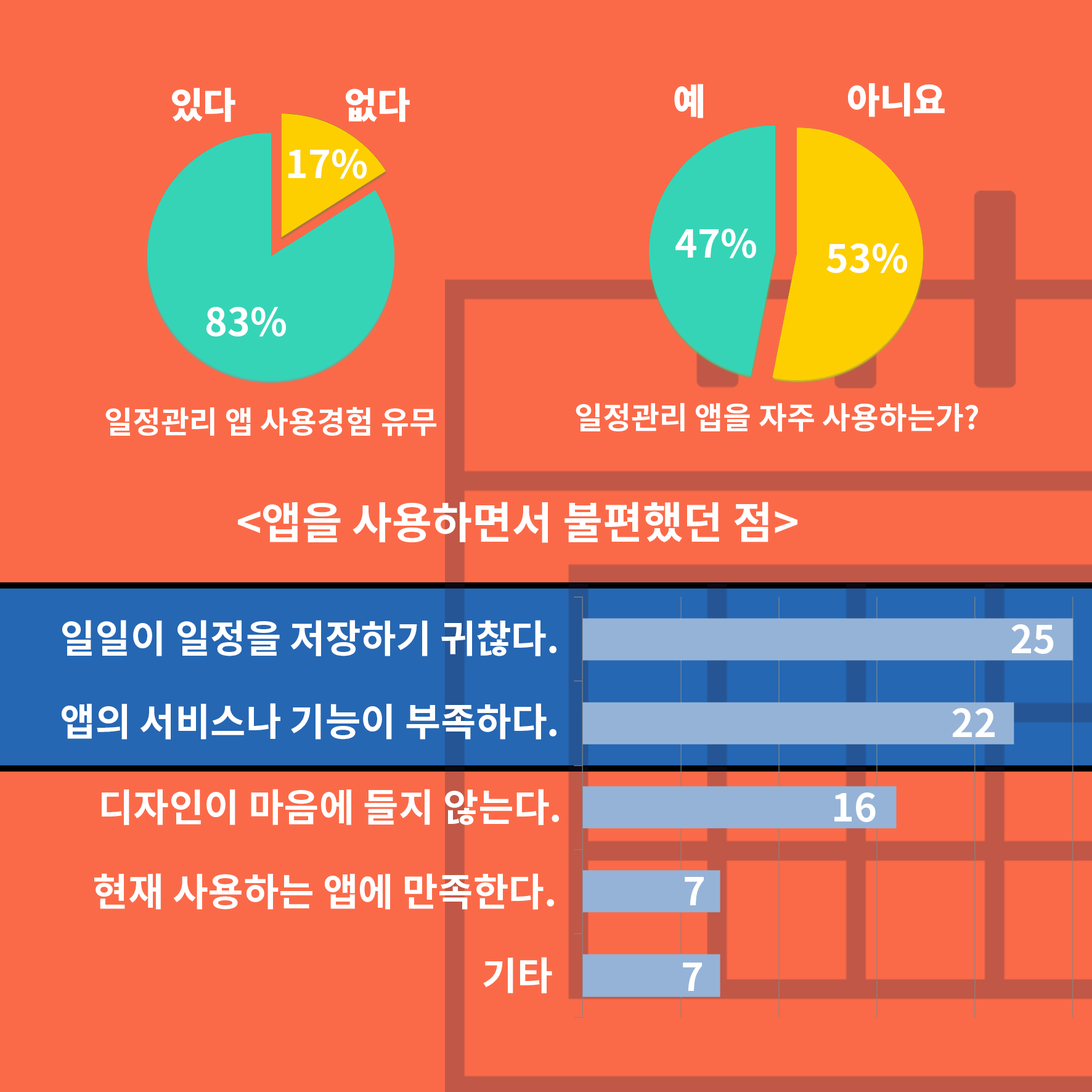
<style>
.page{position:relative;width:1092px;height:1092px;background:#fb6a48}
.page>*{position:absolute;margin:0}
.t1{font:35.9px "NotoSansCJKkr-Black";color:#ffffff}
.t2{font:38.5px "NotoSansCJKkr-Bold";color:#ffffff}
.t3{font:30.8px "NotoSansCJKkr-Bold";color:#ffffff}
.t4{font:43.7px "NotoSansCJKkr-Bold";color:#ffffff}
</style>
<div class="page">
<p class="t1" style="left:172px;top:88px;width:63px;height:34px">있다</p>
<p class="t1" style="left:346px;top:88px;width:64px;height:34px">없다</p>
<p class="t1" style="left:674px;top:84px;width:29px;height:34px">예</p>
<p class="t1" style="left:848px;top:83px;width:97px;height:34px">아니요</p>
<p class="t2" style="left:288px;top:149px;width:79px;height:30px">17%</p>
<p class="t2" style="left:675px;top:229px;width:81px;height:29px">47%</p>
<p class="t2" style="left:826px;top:243px;width:81px;height:30px">53%</p>
<p class="t2" style="left:206px;top:307px;width:80px;height:29px">83%</p>
<p class="t3" style="left:105px;top:407px;width:331px;height:29px">일정관리 앱 사용경험 유무</p>
<p class="t3" style="left:576px;top:403px;width:402px;height:29px">일정관리 앱을 자주 사용하는가?</p>
<p class="t4" style="left:238px;top:502px;width:559px;height:41px">&lt;앱을 사용하면서 불편했던 점&gt;</p>
<p class="t2" style="left:62px;top:620px;width:494px;height:36px">일일이 일정을 저장하기 귀찮다.</p>
<p class="t2" style="left:1011px;top:624px;width:43px;height:30px">25</p>
<p class="t2" style="left:62px;top:703px;width:494px;height:36px">앱의 서비스나 기능이 부족하다.</p>
<p class="t2" style="left:952px;top:708px;width:43px;height:29px">22</p>
<p class="t2" style="left:102px;top:789px;width:457px;height:36px">디자인이 마음에 들지 않는다.</p>
<p class="t2" style="left:834px;top:792px;width:42px;height:30px">16</p>
<p class="t2" style="left:94px;top:873px;width:460px;height:37px">현재 사용하는 앱에 만족한다.</p>
<p class="t2" style="left:685px;top:877px;width:19px;height:28px">7</p>
<p class="t2" style="left:483px;top:957px;width:69px;height:36px">기타</p>
<p class="t2" style="left:683px;top:963px;width:19px;height:28px">7</p>
</div>
